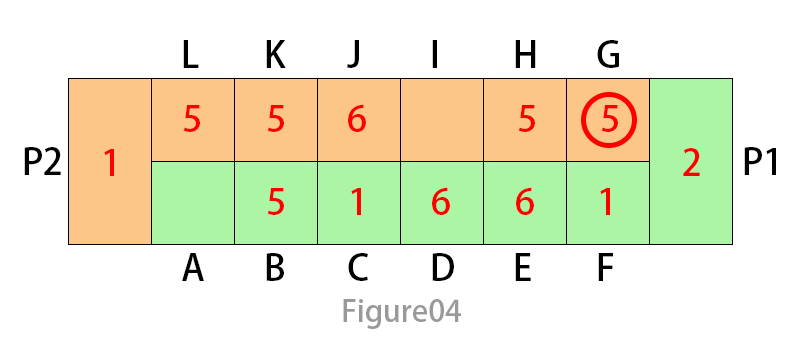
<style>
.page{position:relative;width:800px;height:350px;background:#ffffff}
.page>*{position:absolute;margin:0}
.t1{font:36px "AdobeHeitiStd-Regular";color:#000000}
.t2{font:36px "AdobeHeitiStd-Regular";color:#ff0000}
.t3{font:30px "AdobeHeitiStd-Regular";color:#999999}
</style>
<div class="page">
<p class="t1" style="left:183px;top:40px;width:16px;height:28px">L</p>
<p class="t1" style="left:266px;top:40px;width:20px;height:28px">K</p>
<p class="t1" style="left:347px;top:40px;width:12px;height:28px">J</p>
<p class="t1" style="left:432px;top:40px;width:5px;height:28px">I</p>
<p class="t1" style="left:515px;top:40px;width:21px;height:28px">H</p>
<p class="t1" style="left:597px;top:40px;width:22px;height:28px">G</p>
<p class="t2" style="left:183px;top:105px;width:17px;height:27px">5</p>
<p class="t2" style="left:267px;top:105px;width:17px;height:27px">5</p>
<p class="t2" style="left:348px;top:104px;width:18px;height:28px">6</p>
<p class="t2" style="left:518px;top:105px;width:17px;height:27px">5</p>
<p class="t2" style="left:601px;top:105px;width:17px;height:27px">5</p>
<p class="t1" style="left:24px;top:147px;width:37px;height:28px">P2</p>
<p class="t2" style="left:104px;top:149px;width:10px;height:27px">1</p>
<p class="t2" style="left:683px;top:148px;width:17px;height:28px">2</p>
<p class="t1" style="left:744px;top:147px;width:32px;height:28px">P1</p>
<p class="t2" style="left:267px;top:188px;width:17px;height:27px">5</p>
<p class="t2" style="left:351px;top:188px;width:10px;height:27px">1</p>
<p class="t2" style="left:432px;top:187px;width:18px;height:28px">6</p>
<p class="t2" style="left:516px;top:187px;width:18px;height:28px">6</p>
<p class="t2" style="left:600px;top:188px;width:10px;height:27px">1</p>
<p class="t1" style="left:182px;top:253px;width:22px;height:28px">A</p>
<p class="t1" style="left:266px;top:253px;width:18px;height:28px">B</p>
<p class="t1" style="left:348px;top:253px;width:20px;height:28px">C</p>
<p class="t1" style="left:432px;top:253px;width:22px;height:28px">D</p>
<p class="t1" style="left:515px;top:253px;width:16px;height:28px">E</p>
<p class="t1" style="left:598px;top:253px;width:15px;height:28px">F</p>
<p class="t3" style="left:343px;top:299px;width:118px;height:30px">Figure04</p>
</div>
